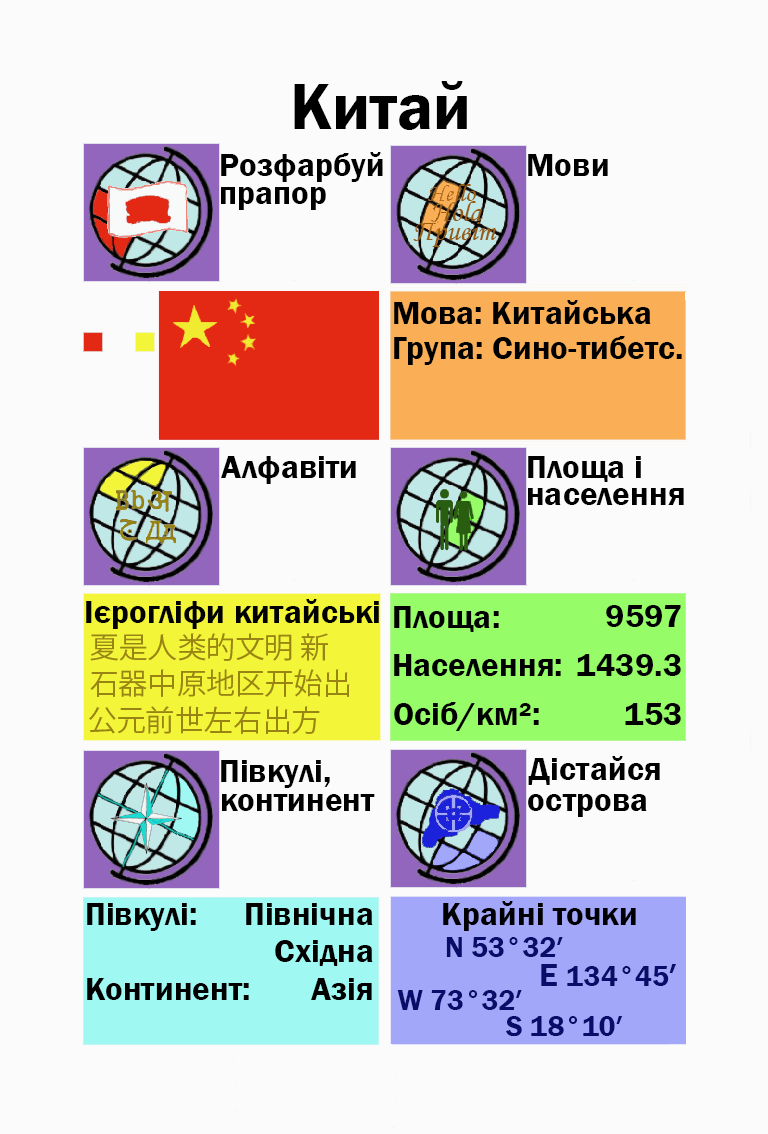
<style>
.page{position:relative;width:768px;height:1134px;background:#fbfbfb}
.page>*{position:absolute;margin:0}
.t1{font:66.7px "FranklinGothic-Demi";color:#000000}
.t2{font:33.3px "FranklinGothic-Demi";color:#000000}
.t3{font:33.3px "FranklinGothic-Demi";color:#000003}
.t4{font:29.2px "KozGoPr6N-Regular";color:#988413}
.t5{font:29.2px "FranklinGothic-Demi";color:#988413}
.t6{font:29.2px "FranklinGothic-Demi";color:#090c69}
.t7{font:33.3px "FranklinGothic-Demi";color:#090c69}
</style>
<div class="page">
<p class="t1" style="left:294px;top:81px;width:173px;height:49px">Китай</p>
<p class="t2" style="left:221px;top:152px;width:162px;height:30px">Розфарбуй</p>
<p class="t2" style="left:528px;top:154px;width:80px;height:22px">Мови</p>
<p class="t2" style="left:221px;top:187px;width:105px;height:23px">прапор</p>
<p class="t2" style="left:394px;top:300px;width:257px;height:24px">Мова: Китайська</p>
<p class="t2" style="left:394px;top:336px;width:288px;height:29px">Група: Сино-тибетс.</p>
<p class="t2" style="left:221px;top:456px;width:135px;height:28px">Алфавіти</p>
<p class="t2" style="left:528px;top:456px;width:113px;height:26px">Площа і</p>
<p class="t2" style="left:528px;top:488px;width:156px;height:17px">населення</p>
<p class="t2" style="left:86px;top:599px;width:293px;height:30px">Ієрогліфи китайські</p>
<p class="t2" style="left:394px;top:606px;width:105px;height:26px">Площа:</p>
<p class="t3" style="left:606px;top:605px;width:75px;height:22px">9597</p>
<p class="t4" style="left:90px;top:633px;width:238px;height:28px"><span class="t5"><br></span>夏是人类的文明 新</p>
<p class="t2" style="left:394px;top:654px;width:167px;height:22px">Населення:</p>
<p class="t2" style="left:577px;top:654px;width:104px;height:22px">1439.3</p>
<p class="t4" style="left:90px;top:669px;width:260px;height:28px">石器中原地区开始出</p>
<p class="t2" style="left:394px;top:702px;width:145px;height:29px">Осіб/км²:</p>
<p class="t4" style="left:89px;top:706px;width:231px;height:28px">公元前世左右出方</p>
<p class="t2" style="left:625px;top:703px;width:56px;height:22px">153</p>
<p class="t2" style="left:221px;top:760px;width:109px;height:28px">Півкулі,</p>
<p class="t2" style="left:528px;top:756px;width:132px;height:29px">Дістайся</p>
<p class="t2" style="left:222px;top:794px;width:153px;height:17px">континент</p>
<p class="t2" style="left:528px;top:794px;width:119px;height:23px">острова</p>
<p class="t2" style="left:87px;top:903px;width:109px;height:28px">Півкулі:</p>
<p class="t2" style="left:246px;top:903px;width:127px;height:22px">Північна</p>
<p class="t3" style="left:443px;top:901px;width:193px;height:30px">Крайні точки</p>
<p class="t2" style="left:275px;top:940px;width:98px;height:26px">Східна</p>
<p class="t6" style="left:446px;top:937px;width:117px;height:20px">N 53°32′</p>
<p class="t6" style="left:541px;top:964px;width:135px;height:22px"><span class="t7">E </span>134°45<span class="t7">′</span></p>
<p class="t2" style="left:87px;top:978px;width:162px;height:22px">Континент:</p>
<p class="t2" style="left:311px;top:978px;width:61px;height:22px">Азія</p>
<p class="t6" style="left:397px;top:990px;width:125px;height:20px">W 73°32′</p>
<p class="t6" style="left:506px;top:1016px;width:117px;height:21px">S 18°10′</p>
</div>
